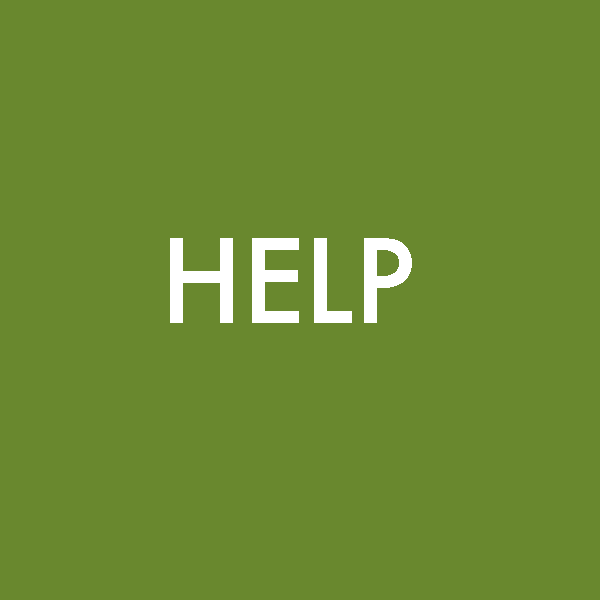
<style>
.page{position:relative;width:600px;height:600px;background:#69882e}
.page>*{position:absolute;margin:0}
.t1{font:112.7px "Futura-Medium";color:#ffffff}
</style>
<div class="page">
<p class="t1" style="left:170px;top:238px;width:242px;height:85px">HELP</p>
</div>
